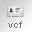
<style>
.page{position:relative;width:32px;height:32px}
.page>*{position:absolute;margin:0}
.t1{font:9px "ArialMT";color:#707070}
</style>
<div class="page">
<p class="t1" style="left:8px;top:21px;width:14px;height:7px">vcf</p>
</div>
